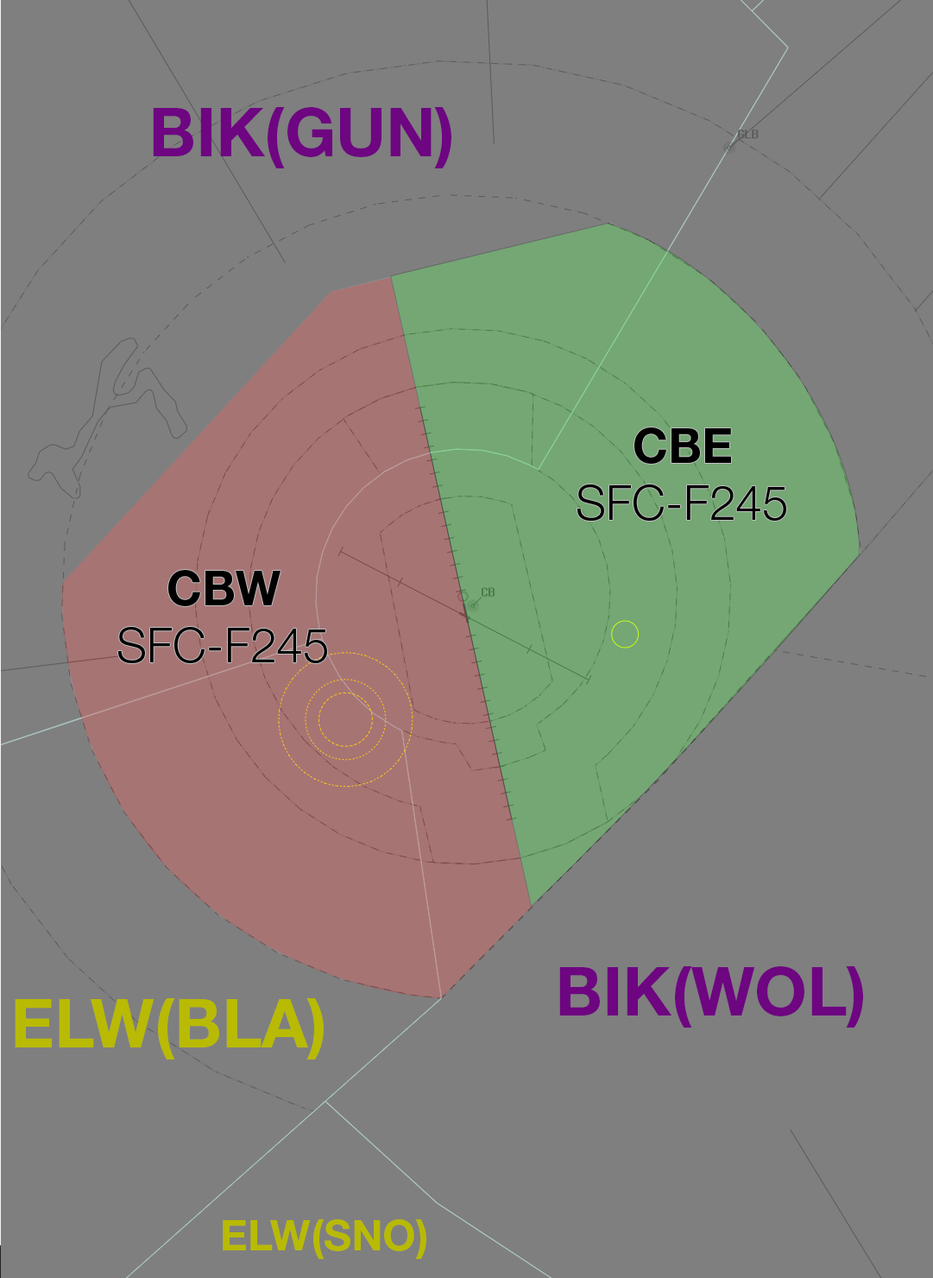
<style>
.page{position:relative;width:933px;height:1278px;background:#7f7f7f}
.page>*{position:absolute;margin:0}
.t1{font:67.4px "HelveticaNeueLTStd-Bd";color:#6e0581}
.t2{font:47.9px "HelveticaNeueLTStd-Lt";color:#000000}
.t3{font:47.9px "HelveticaNeueLTStd-Bd";color:#000000}
.t4{font:67.4px "HelveticaNeueLTStd-Bd";color:#b8ba04}
.t5{font:42.6px "HelveticaNeueLTStd-Bd";color:#b8ba04}
</style>
<div class="page">
<p class="t1" style="left:153px;top:107px;width:299px;height:61px">BIK(GUN)</p>
<p class="t2" style="left:578px;top:427px;width:208px;height:94px;text-align:center"><span class="t3">CBE<br></span>SFC-F245</p>
<p class="t2" style="left:118px;top:570px;width:209px;height:93px;text-align:center"><span class="t3">CBW<br></span>SFC-F245</p>
<p class="t1" style="left:559px;top:966px;width:304px;height:61px">BIK(WOL)</p>
<p class="t4" style="left:15px;top:998px;width:309px;height:61px">ELW(BLA)</p>
<p class="t5" style="left:223px;top:1219px;width:203px;height:40px">ELW(SNO)</p>
</div>
